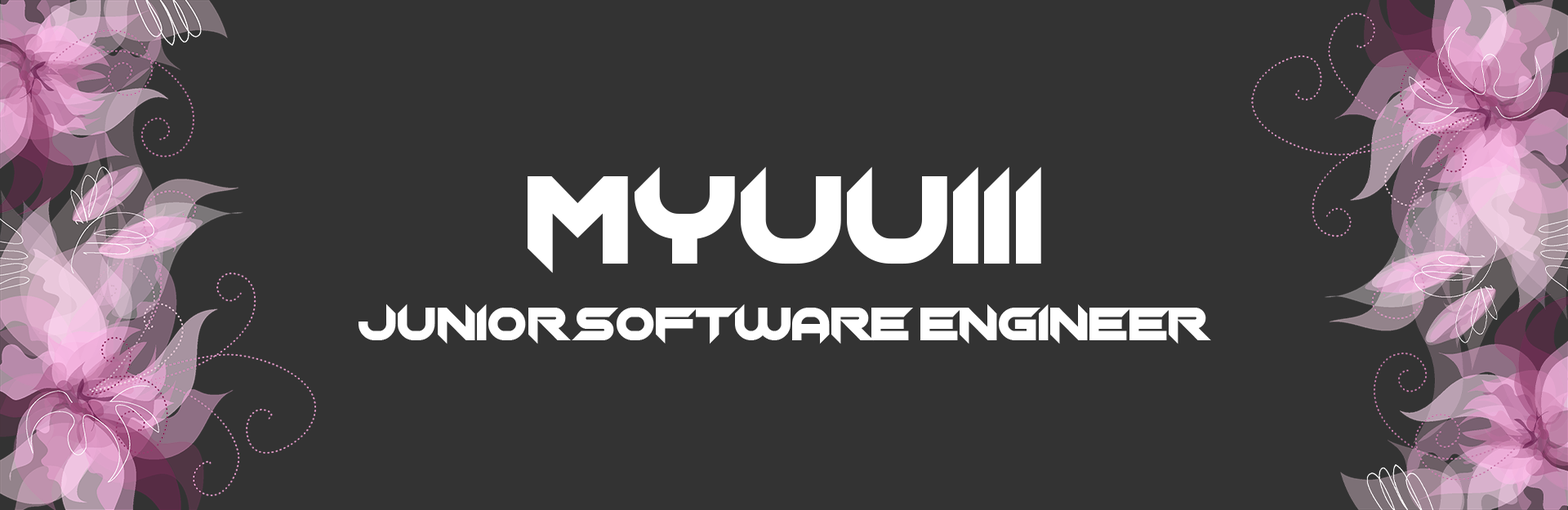
<style>
.page{position:relative;width:1568px;height:510px;background:#333333}
.page>*{position:absolute;margin:0}
.t1{font:128.1px "Chopsic";color:#ffffff}
.t2{font:47.6px "Chopsic";color:#ffffff}
</style>
<div class="page">
<p class="t1" style="left:528px;top:167px;width:513px;height:107px">Myuuiii</p>
<p class="t2" style="left:359px;top:304px;width:852px;height:41px">Junior SOftware Engineer</p>
</div>
